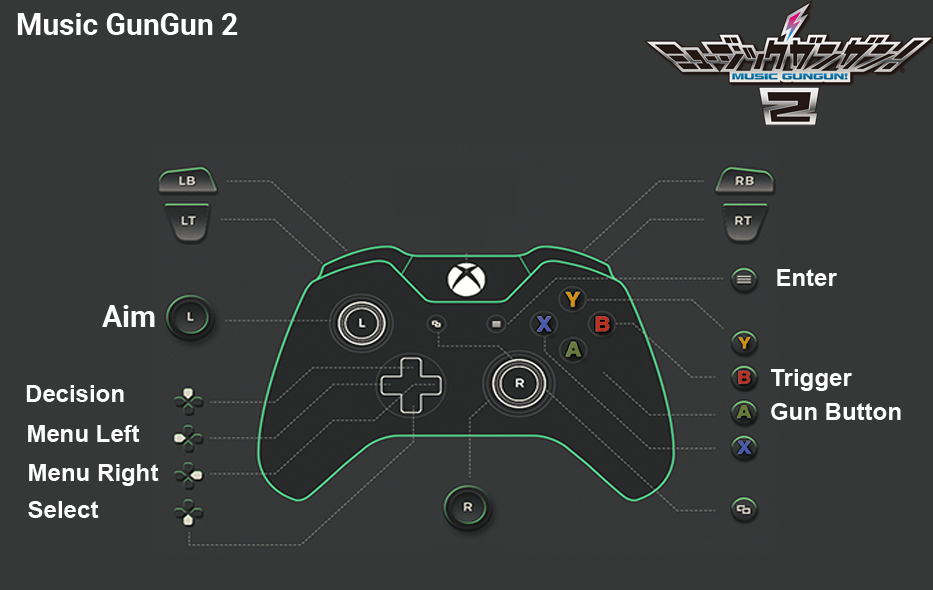
<style>
.page{position:relative;width:933px;height:590px;background:#363838}
.page>*{position:absolute;margin:0}
.t1{font:30px "Roboto-Bold";color:#ffffff}
.t2{font:24px "Arial-BoldMT";color:#fefefe}
.t3{font:30px "Roboto-Bold";color:#fefefe}
</style>
<div class="page">
<p class="t1" style="left:17px;top:13px;width:221px;height:22px">Music GunGun 2</p>
<p class="t2" style="left:777px;top:269px;width:60px;height:17px">Enter</p>
<p class="t3" style="left:102px;top:305px;width:53px;height:22px">Aim</p>
<p class="t2" style="left:771px;top:369px;width:81px;height:22px">Trigger</p>
<p class="t2" style="left:26px;top:385px;width:98px;height:17px">Decision</p>
<p class="t2" style="left:771px;top:403px;width:130px;height:17px">Gun Button</p>
<p class="t2" style="left:28px;top:425px;width:112px;height:17px">Menu Left</p>
<p class="t2" style="left:29px;top:464px;width:130px;height:22px">Menu Right</p>
<p class="t2" style="left:28px;top:501px;width:71px;height:17px">Select</p>
</div>
